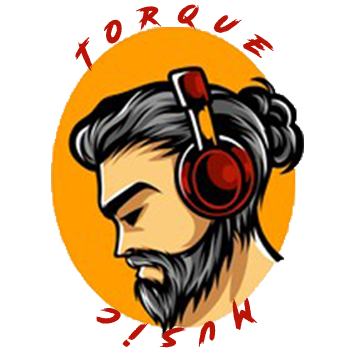
<style>
.page{position:relative;width:350px;height:350px;background:#ffffff}
.page>*{position:absolute;margin:0}
.t1{font:27.5px "RoadRage";letter-spacing:0.6em;color:#ba1307;font-weight:bold}
.t2{font:27.5px/43.8px "RoadRage";letter-spacing:0.6em;color:#ba1307;font-weight:bold}
</style>
<div class="page">
<p class="t1" style="left:75px;top:4px;width:199px;height:67px;rotate:1deg">Torque</p>
<p class="t2" style="left:96px;top:298px;width:161px;height:50px;text-align:center">Music</p>
</div>
